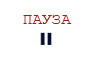
<style>
.page{position:relative;width:90px;height:62px;background:#ffffff}
.page>*{position:absolute;margin:0}
.t1{font:16px "CourierNewPSMT";color:#912816}
</style>
<div class="page">
<p class="t1" style="left:23px;top:15px;width:49px;height:9px">ПАУЗА</p>
</div>
